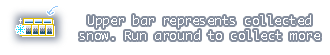
<style>
.page{position:relative;width:330px;height:55px;background:#ffffff}
.page>*{position:absolute;margin:0}
.t1{font:12.5px "Ayuthaya";color:#ffffff}
.t2{font:13px "Ayuthaya";color:#ffffff}
</style>
<div class="page">
<p class="t1" style="left:80px;top:15px;width:240px;height:25px;text-align:center">Upper bar represents collected snow. Run <span class="t2">around </span>to collect more</p>
</div>
